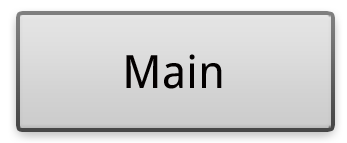
<style>
.page{position:relative;width:347px;height:143px}
.page>*{position:absolute;margin:0}
.t1{font:45.8px "DroidSans";color:#030000}
</style>
<div class="page">
<p class="t1" style="left:126px;top:54px;width:96px;height:35px">Main</p>
</div>
